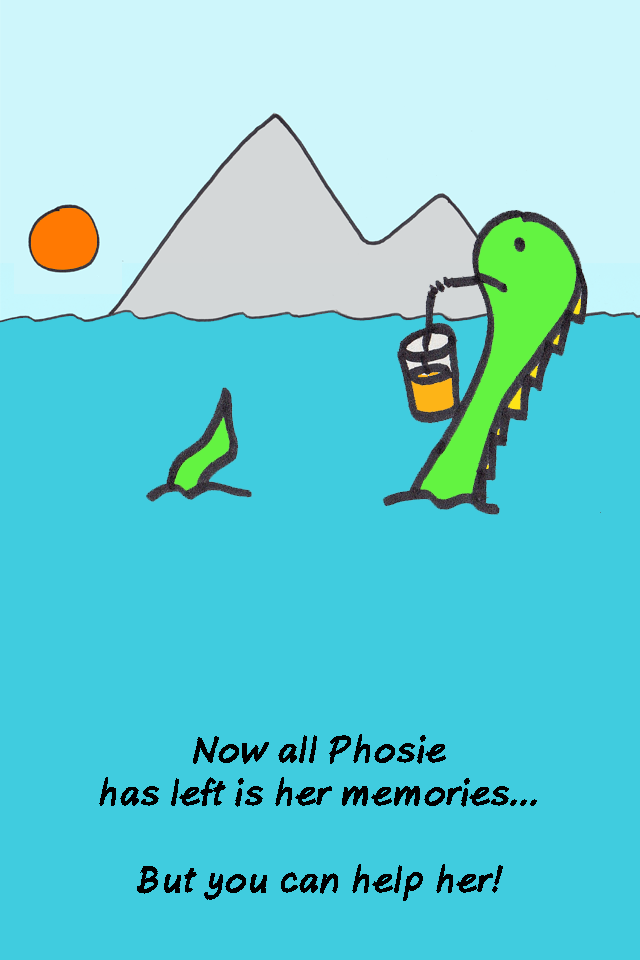
<style>
.page{position:relative;width:640px;height:960px;background:#40ccdf}
.page>*{position:absolute;margin:0}
.t1{font:36px "AxureHandwriting-BoldItalic";color:#000000}
</style>
<div class="page">
<p class="t1" style="left:99px;top:734px;width:438px;height:167px;text-align:center">Now all Phosie<br>has left is her memories...<br><br>But you can help her!</p>
</div>
